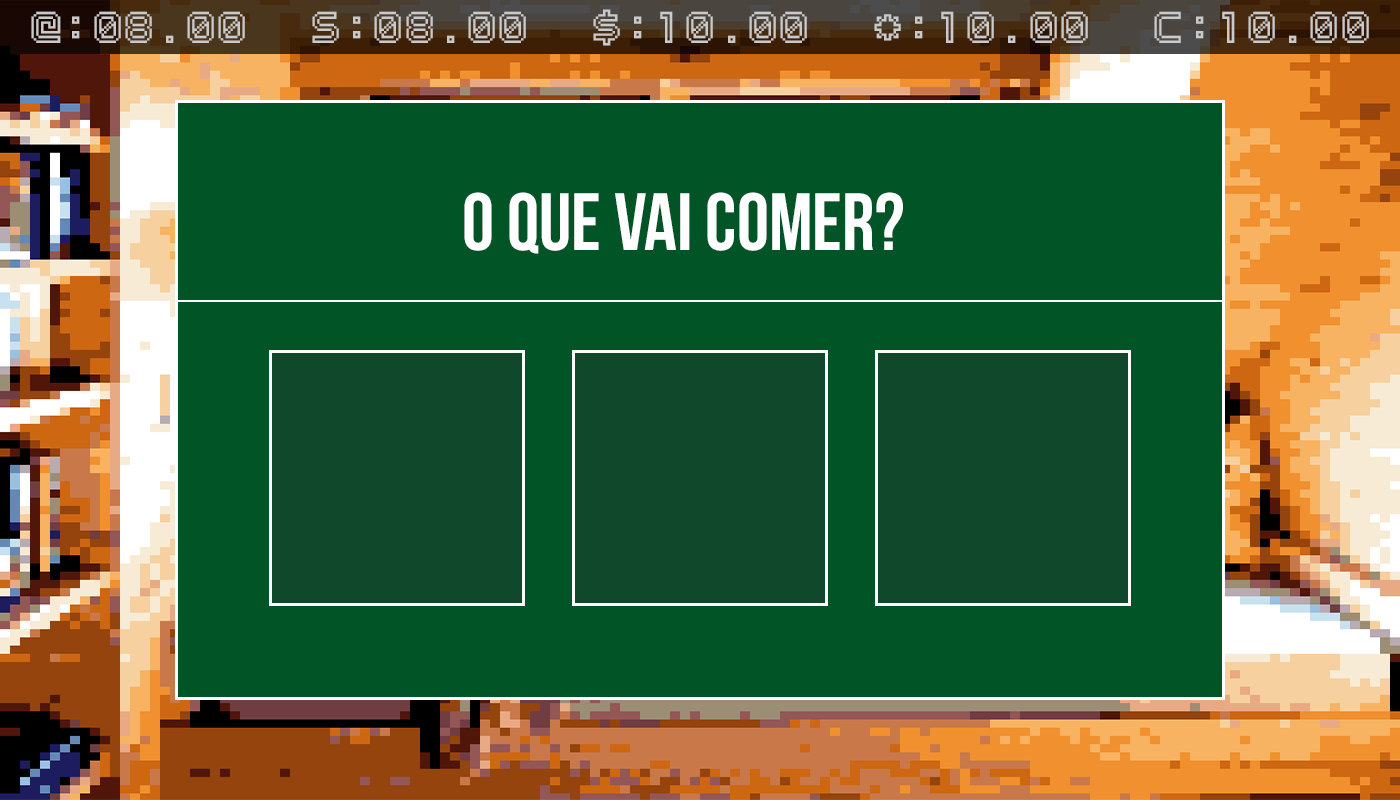
<style>
.page{position:relative;width:1400px;height:800px;background:#005425}
.page>*{position:absolute;margin:0}
.t1{font:48px "OutlinePixel-7";color:#cacaca}
.t2{font:81px "BebasNeue";color:#fefefe}
</style>
<div class="page">
<p class="t1" style="left:31px;top:9px;width:1338px;height:37px">@:08.00  S:08.00  $:10.00  *:10.00  C:10.00</p>
<p class="t2" style="left:464px;top:192px;width:439px;height:62px">O que vai comer?</p>
</div>
